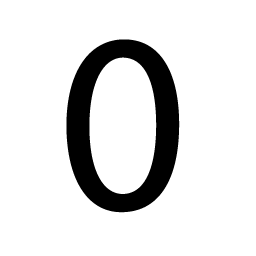
<style>
.page{position:relative;width:256px;height:256px;background:#ffffff}
.page>*{position:absolute;margin:0}
.t1{font:256px "MyriadPro-Regular";letter-spacing:-0.1em;color:#000000;font-weight:bold}
</style>
<div class="page">
<p class="t1" style="left:66px;top:39px;width:114px;height:174px">0</p>
</div>
